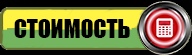
<style>
.page{position:relative;width:192px;height:55px;background:#000000}
.page>*{position:absolute;margin:0}
.t1{font:23.7px "Impact";color:#000000}
</style>
<div class="page">
<p class="t1" style="left:14px;top:19px;width:116px;height:19px">СТОИМОСТЬ</p>
</div>
